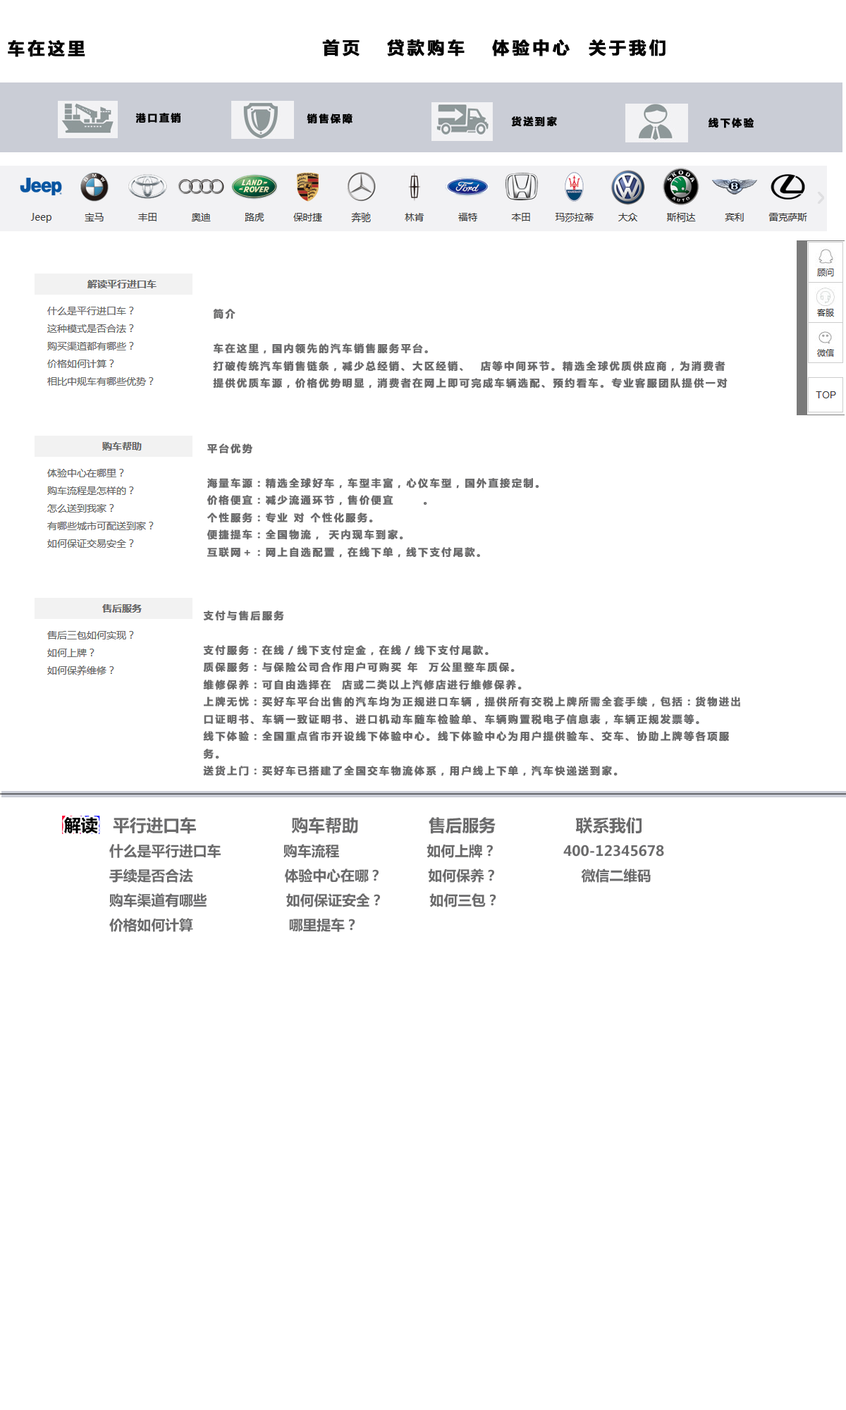
<style>
.page{position:relative;width:846px;height:1410px;background:#ffffff}
.page>*{position:absolute;margin:0}
.t1{font:16.9px "MicrosoftYaHei";letter-spacing:0.16em;color:#030303;font-weight:bold}
.t2{font:9.9px "MicrosoftYaHei";letter-spacing:0.16em;color:#000000;font-weight:bold}
.t3{font:9.9px "MicrosoftYaHei";letter-spacing:0.16em;color:#6b6b6c;font-weight:bold}
.t4{font:7px "MicrosoftYaHei";letter-spacing:0.16em;color:#6b6b6c;font-weight:bold}
.t5{font:16.8px "MicrosoftYaHei";color:#6b6b6c}
.t6{font:16.8px "MicrosoftYaHei";color:#000000}
.t7{font:14px "MicrosoftYaHei";color:#6b6b6c}
</style>
<div class="page">
<p class="t1" style="left:8px;top:39px;width:77px;height:18px">车在这里</p>
<p class="t1" style="left:322px;top:39px;width:343px;height:17px">首页 | 贷款购车 | 体验中心 |关于我们</p>
<p class="t2" style="left:135px;top:113px;width:46px;height:10px">港口直销</p>
<p class="t2" style="left:307px;top:113px;width:45px;height:11px">销售保障</p>
<p class="t2" style="left:511px;top:116px;width:46px;height:11px">货送到家</p>
<p class="t2" style="left:708px;top:118px;width:46px;height:10px">线下体验</p>
<p class="t3" style="left:213px;top:309px;width:514px;height:79px"><span class="t4"><br><br><br></span>简介<br><br>车在这里，国内领先的汽车销售服务平台。<br>打破传统汽车销售链条，减少总经销、大区经销、4S店等中间环节。精选全球优质供应商，为消费者提供优质车源，价格优势明显，消费者在网上即可完成车辆选配、预约看车。专业客服团队提供一对一私人服务，全程协助解决购车过程中遇到问题。完善的售后服务，最大幅度节省消费者的资金成本，时间成本。</p>
<p class="t3" style="left:207px;top:443px;width:332px;height:115px">平台优势<br><br>海量车源：精选全球好车，车型丰富，心仪车型，国外直接定制。<br>价格便宜：减少流通环节，售价便宜10-20%。<br>个性服务：专业1对1个性化服务。<br>便捷提车：全国物流，7天内现车到家。<br>互联网＋：网上自选配置，在线下单，线下支付尾款。<br>线下体验：全国重要省市开设线下体验中心，现车体验，更放心。</p>
<p class="t3" style="left:203px;top:610px;width:537px;height:166px">支付与售后服务<br><br>支付服务：在线／线下支付定金，在线／线下支付尾款。<br>质保服务：与保险公司合作用户可购买3年/6万公里整车质保。<br>维修保养：可自由选择在4S店或二类以上汽修店进行维修保养。<br>上牌无忧：买好车平台出售的汽车均为正规进口车辆，提供所有交税上牌所需全套手续，包括：货物进出口证明书、车辆一致证明书、进口机动车随车检验单、车辆购置税电子信息表，车辆正规发票等。<br>线下体验：全国重点省市开设线下体验中心。线下体验中心为用户提供验车、交车、协助上牌等各项服务。<br>送货上门：买好车已搭建了全国交车物流体系，用户线上下单，汽车快递送到家。</p>
<p class="t5" style="left:64px;top:817px;width:577px;height:17px"><span class="t6">解读   </span>平行进口车                   购车帮助              售后服务                联系我们</p>
<p class="t7" style="left:109px;top:844px;width:555px;height:88px">什么是平行进口车               购车流程                     如何上牌？                400-12345678<br>手续是否合法                      体验中心在哪？           如何保养？                    微信二维码<br>购车渠道有哪些                   如何保证安全？           如何三包？<br>价格如何计算                       哪里提车？</p>
</div>
